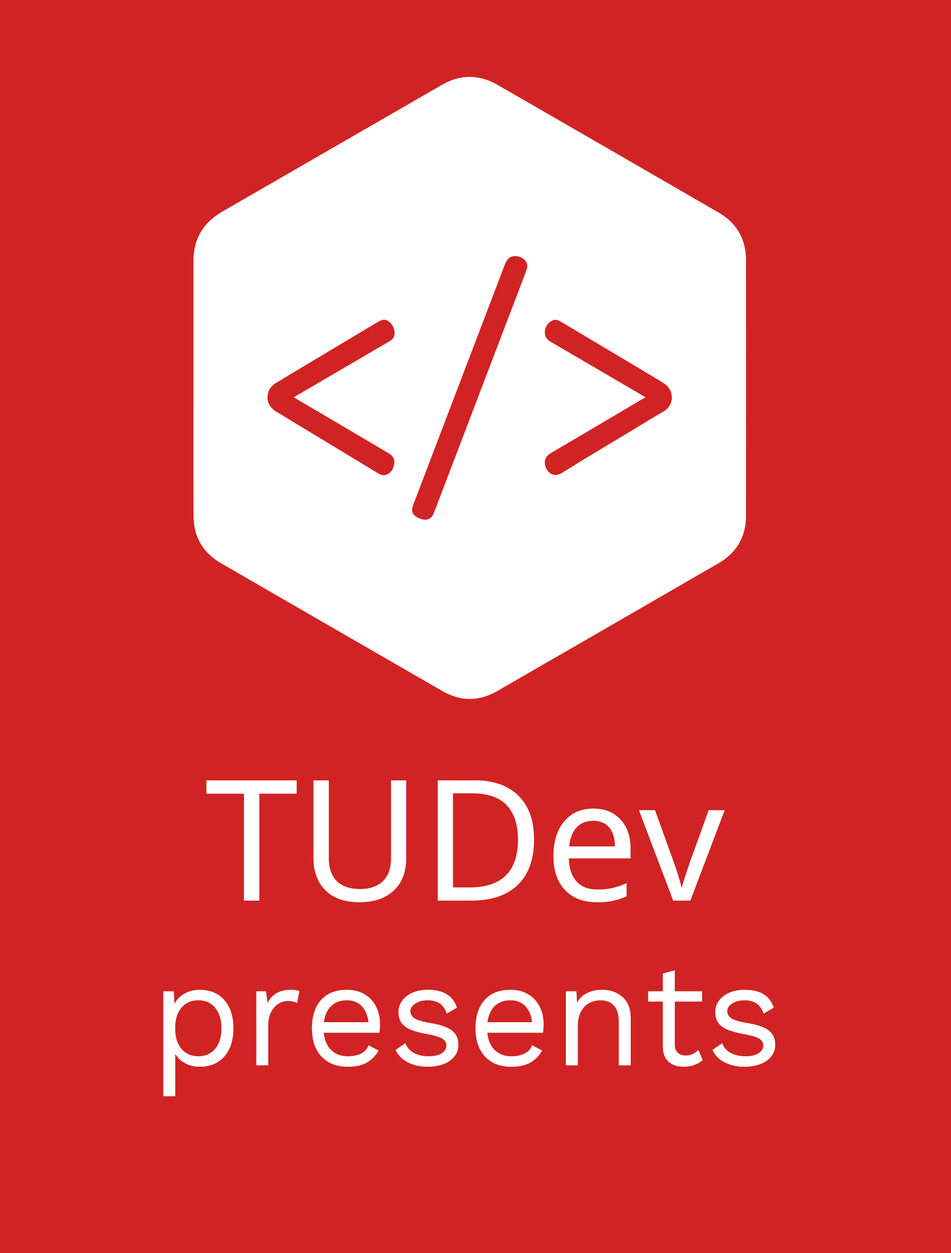
<style>
.page{position:relative;width:951px;height:1253px;background:#d12323}
.page>*{position:absolute;margin:0}
.t1{font:168.3px "NotoSans";color:#ffffff}
.t2{font:147.7px "WorkSans-Regular";color:#fefefe}
</style>
<div class="page">
<p class="t1" style="left:206px;top:781px;width:519px;height:122px">TUDev</p>
<p class="t2" style="left:163px;top:970px;width:613px;height:127px">presents</p>
</div>
